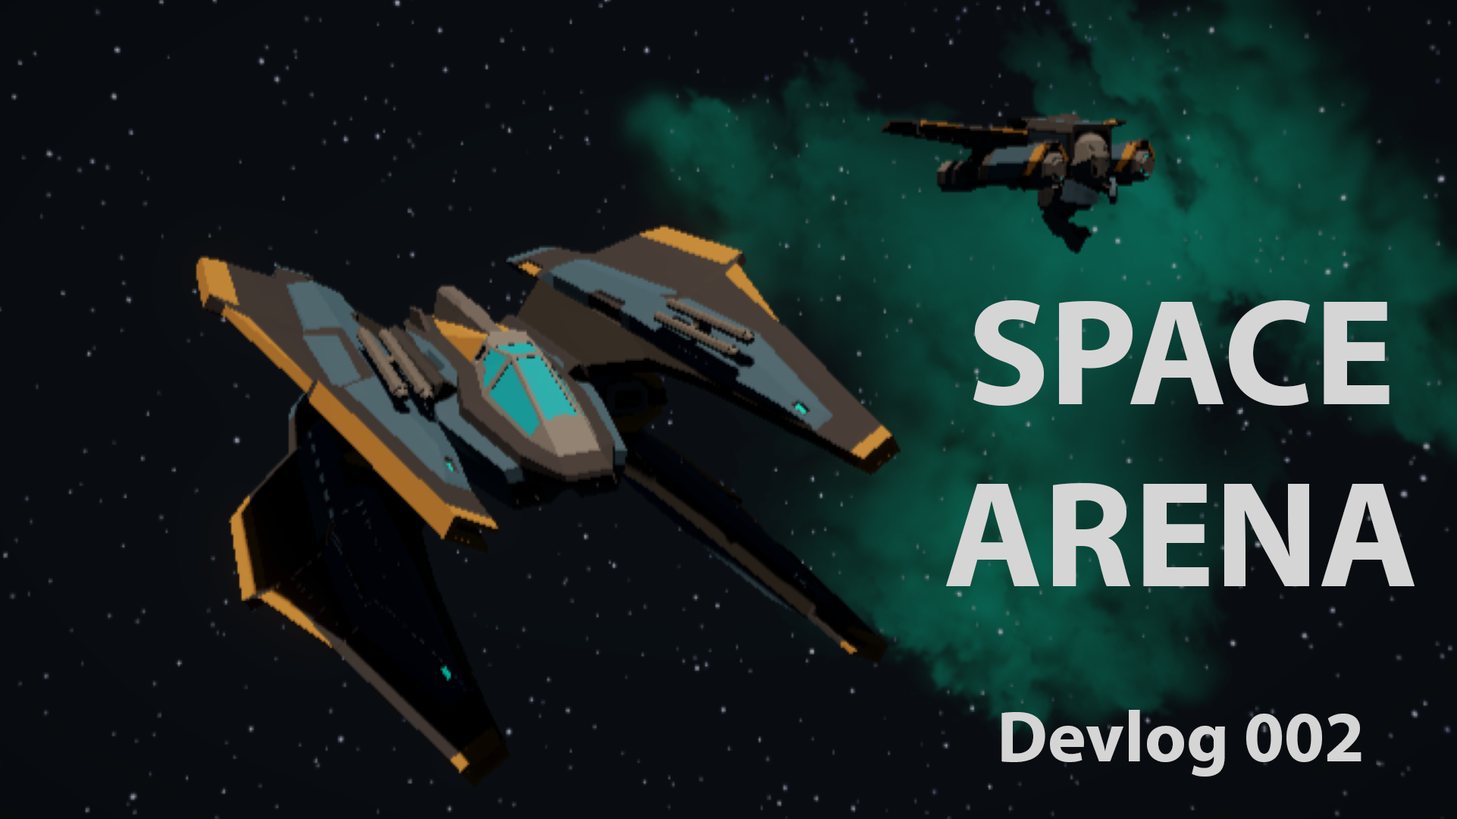
<style>
.page{position:relative;width:1457px;height:819px}
.page>*{position:absolute;margin:0}
.t1{font:151.6px "MyriadPro-Bold";color:#d5d5d5}
.t2{font:72.8px "MyriadPro-Bold";color:#d5d5d5}
</style>
<div class="page">
<p class="t1" style="left:946px;top:299px;width:468px;height:477px;text-align:center">SPACE<br>ARENA<br><span class="t2"><br>Devlog 002</span></p>
</div>
